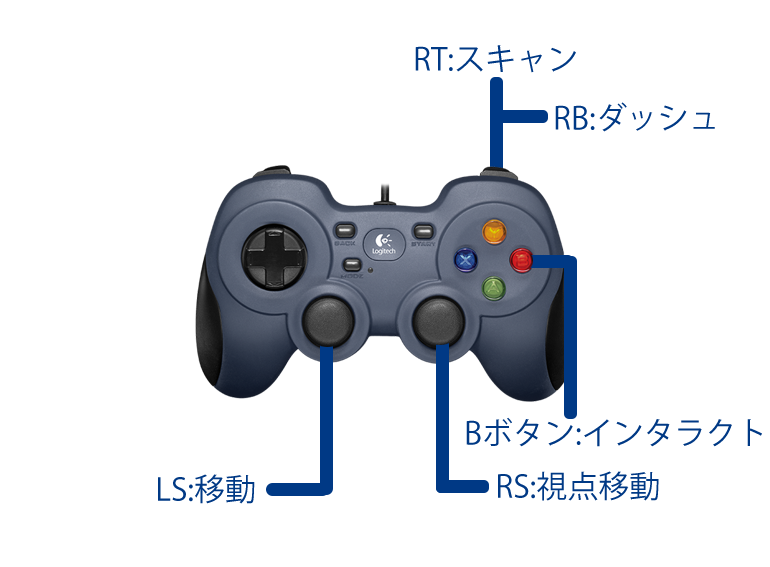
<style>
.page{position:relative;width:770px;height:567px;background:#ffffff}
.page>*{position:absolute;margin:0}
.t1{font:31px "KozGoPr6N-Regular";color:#003985}
</style>
<div class="page">
<p class="t1" style="left:415px;top:45px;width:161px;height:28px">RT:スキャン</p>
<p class="t1" style="left:555px;top:102px;width:160px;height:30px">RB:ダッシュ</p>
<p class="t1" style="left:466px;top:417px;width:296px;height:30px">Bボタン:インタラクト</p>
<p class="t1" style="left:498px;top:471px;width:161px;height:30px">RS:視点移動</p>
<p class="t1" style="left:158px;top:474px;width:97px;height:30px">LS:移動</p>
</div>
